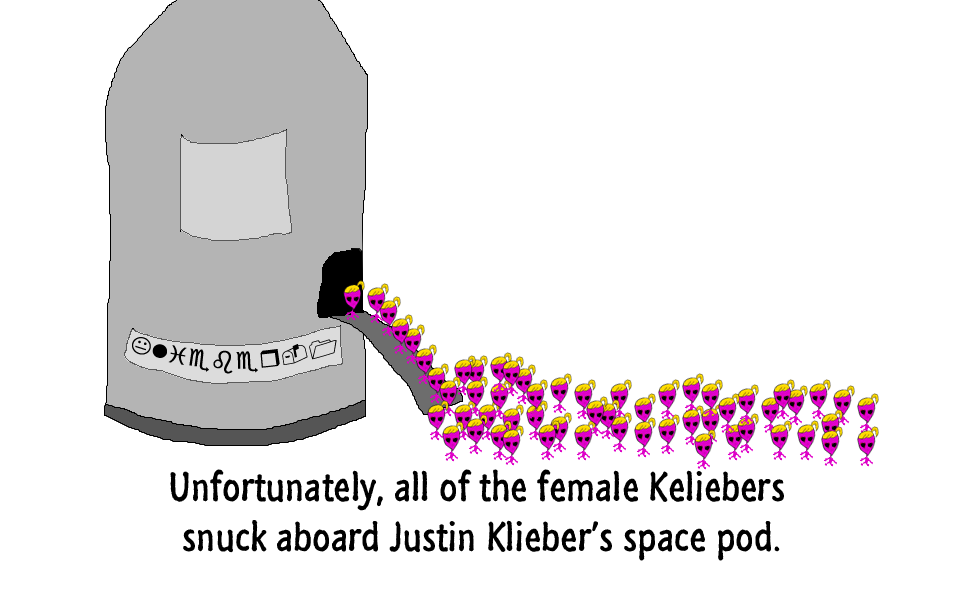
<style>
.page{position:relative;width:960px;height:600px;background:#ffffff}
.page>*{position:absolute;margin:0}
.t1{font:42px "SegoeMarker";color:#000000}
</style>
<div class="page">
<p class="t1" style="left:170px;top:469px;width:614px;height:92px;text-align:center">Unfortunately, all of the female Keliebers <br>snuck aboard Justin Klieber’s space pod.</p>
</div>
